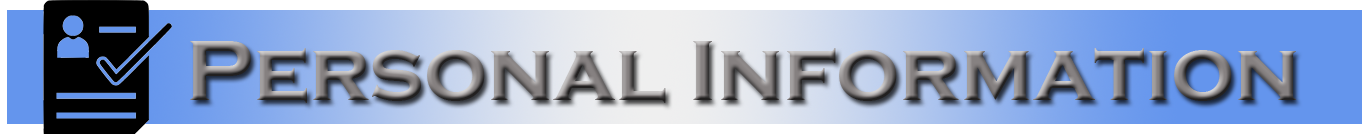
<style>
.page{position:relative;width:1370px;height:134px}
.page>*{position:absolute;margin:0}
.t1{font:88.7px "CopperplateGothic-Bold"}
</style>
<div class="page">
<p class="t1" style="left:190px;top:41px;width:1106px;height:62px">Personal Information</p>
</div>
